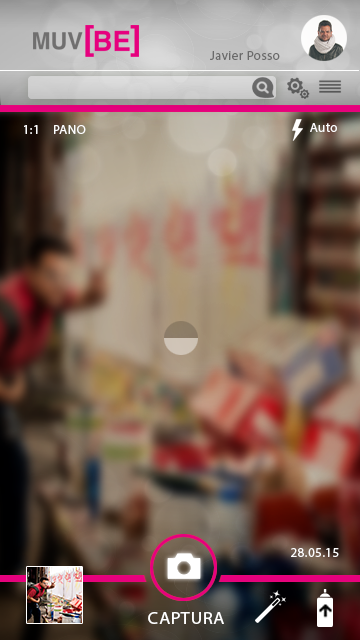
<style>
.page{position:relative;width:360px;height:640px}
.page>*{position:absolute;margin:0}
.t1{font:13px "MyriadPro-Regular";letter-spacing:0.035em;color:#6a6a6a}
.t2{font:13px "MyriadPro-Regular";letter-spacing:0.035em;color:#fdfdfe}
.t3{font:17.5px "MyriadPro-Regular";letter-spacing:0.035em;color:#ffffff;scale:1.03 1}
</style>
<div class="page">
<p class="t1" style="left:210px;top:51px;width:70px;height:9px">Javier Posso</p>
<p class="t2" style="left:24px;top:125px;width:62px;height:9px">1:1    PANO</p>
<p class="t2" style="left:310px;top:123px;width:27px;height:9px">Auto</p>
<p class="t2" style="left:291px;top:548px;width:48px;height:9px">28.05.15</p>
<p class="t3" style="left:148px;top:612px;width:76px;height:12px">CAPTURA</p>
</div>
